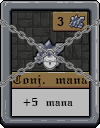
<style>
.page{position:relative;width:100px;height:128px}
.page>*{position:absolute;margin:0}
.t1{font:12px "Arial-BoldMT";color:#000000}
.t2{font:12px "SWGothe";color:#000000}
.t3{font:10px "SWGothe";color:#000000}
</style>
<div class="page">
<p class="t1" style="left:57px;top:17px;width:7px;height:9px">3</p>
<p class="t2" style="left:12px;top:75px;width:76px;height:12px">Conj. mana</p>
<p class="t3" style="left:23px;top:98px;width:50px;height:8px">+5 mana</p>
</div>
